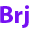
<style>
.page{position:relative;width:30px;height:30px;background:#ffffff}
.page>*{position:absolute;margin:0}
.t1{font:25px "MyriadPro-Bold";color:#750ff2}
</style>
<div class="page">
<p class="t1" style="left:0px;top:5px;width:29px;height:23px">Brj</p>
</div>
